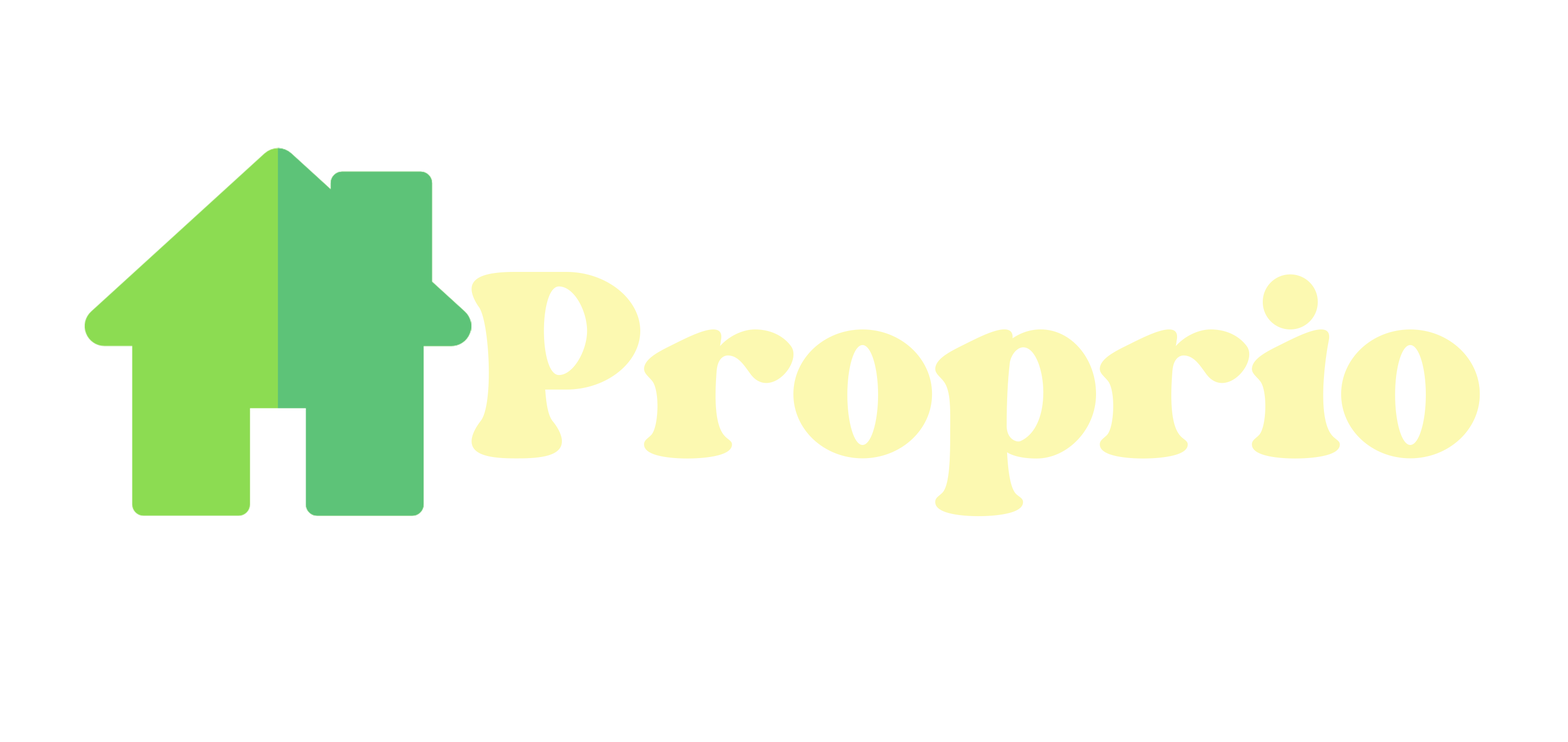
<style>
.page{position:relative;width:1568px;height:742px;background:#ffffff}
.page>*{position:absolute;margin:0}
.t1{font:371.7px "Margin-DEMO";color:#fcf9b1}
</style>
<div class="page">
<p class="t1" style="left:471px;top:272px;width:1009px;height:244px">Proprio</p>
</div>
